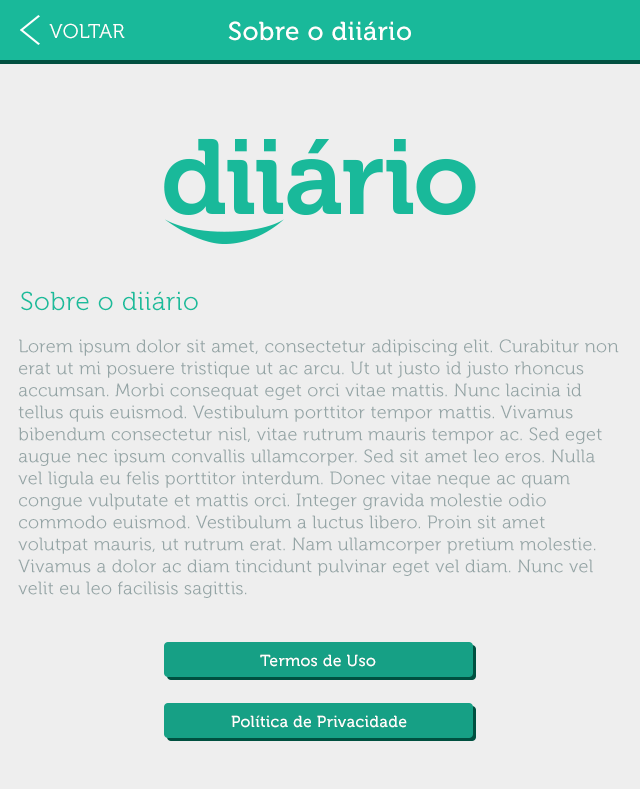
<style>
.page{position:relative;width:640px;height:789px;background:#eeeeee}
.page>*{position:absolute;margin:0}
.t1{font:20px "Museo300-Regular";letter-spacing:0.02em;color:#ffffff;text-transform:uppercase}
.t2{font:26px "Museo500-Regular";letter-spacing:0.02em;color:#ffffff}
.t3{font:26px "Museo300-Regular";letter-spacing:0.02em;color:#1abc9c}
.t4{font:18px/22px "Museo300-Regular";letter-spacing:0.02em;color:#95a5a6}
.t5{font:16px "Museo500-Regular";letter-spacing:0.02em;color:#ffffff}
</style>
<div class="page">
<p class="t1" style="left:49px;top:23px;width:76px;height:16px">Voltar</p>
<p class="t2" style="left:228px;top:21px;width:183px;height:20px">Sobre o diiário</p>
<p class="t3" style="left:21px;top:291px;width:177px;height:20px">Sobre o diiário</p>
<p class="t4" style="left:18px;top:339px;width:601px;height:259px">Lorem ipsum dolor sit amet, consectetur adipiscing elit. Curabitur non erat ut mi posuere tristique ut ac arcu. Ut ut justo id justo rhoncus accumsan. Morbi consequat eget orci vitae mattis. Nunc lacinia id tellus quis euismod. Vestibulum porttitor tempor mattis. Vivamus bibendum consectetur nisl, vitae rutrum mauris tempor ac. Sed eget augue nec ipsum convallis ullamcorper. Sed sit amet leo eros. Nulla vel ligula eu felis porttitor interdum. Donec vitae neque ac quam congue vulputate et mattis orci. Integer gravida molestie odio commodo euismod. Vestibulum a luctus libero. Proin sit amet volutpat mauris, ut rutrum erat. Nam ullamcorper pretium molestie. Vivamus a dolor ac diam tincidunt pulvinar eget vel diam. Nunc vel velit eu leo facilisis sagittis.</p>
<p class="t5" style="left:260px;top:654px;width:116px;height:13px">Termos de Uso</p>
<p class="t5" style="left:231px;top:715px;width:176px;height:13px">Política de Privacidade</p>
</div>
